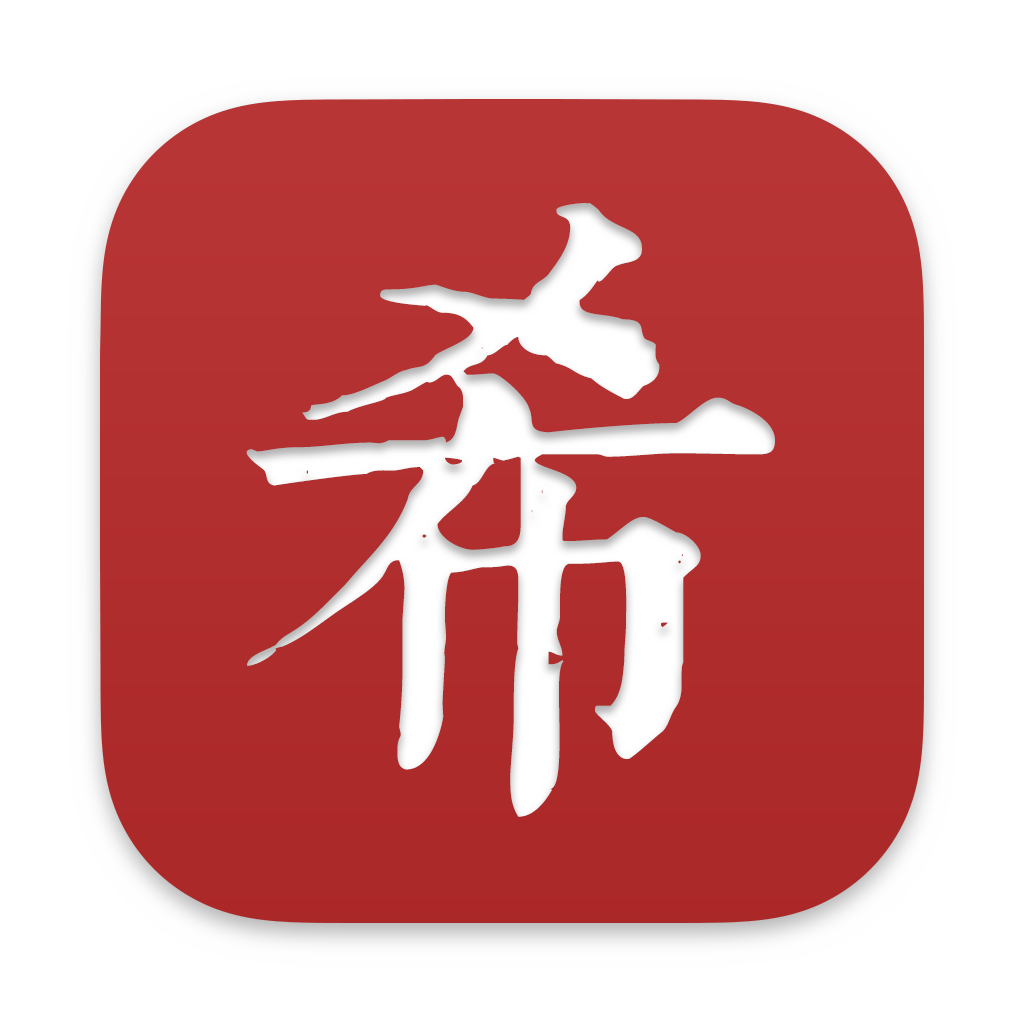
<style>
.page{position:relative;width:1024px;height:1024px;background:#ffffff}
.page>*{position:absolute;margin:0}
.t1{font:576px "TpldKhangXiDictDemo";color:#ffffff}
</style>
<div class="page">
<p class="t1" style="left:246px;top:203px;width:529px;height:614px">希</p>
</div>
